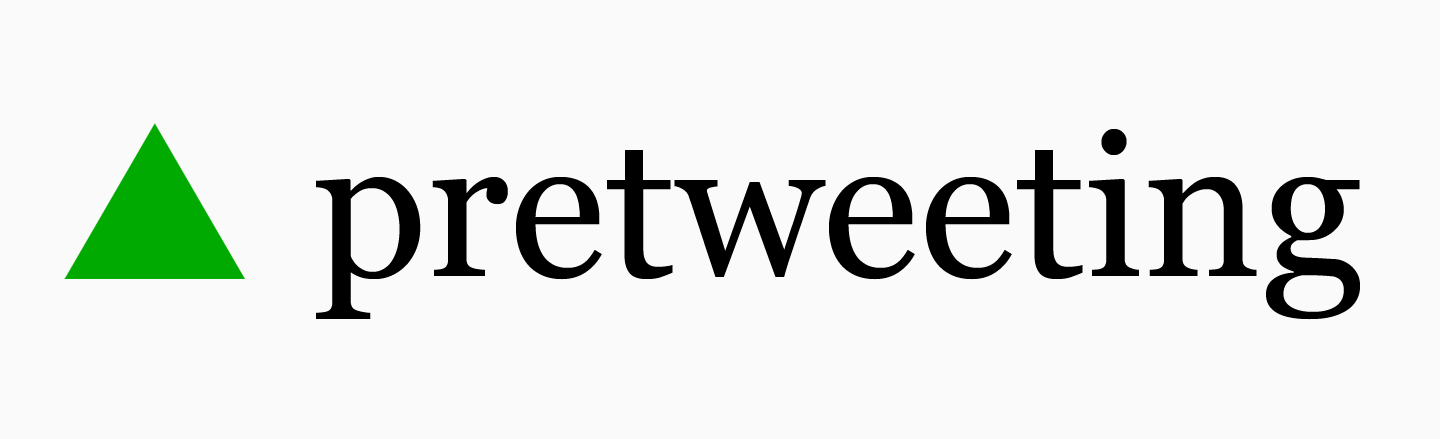
<style>
.page{position:relative;width:1440px;height:439px;background:#fafafa}
.page>*{position:absolute;margin:0}
.t1{font:200px "Georgia";color:#000000}
</style>
<div class="page">
<p class="t1" style="left:316px;top:129px;width:1044px;height:191px">pretweeting</p>
</div>
